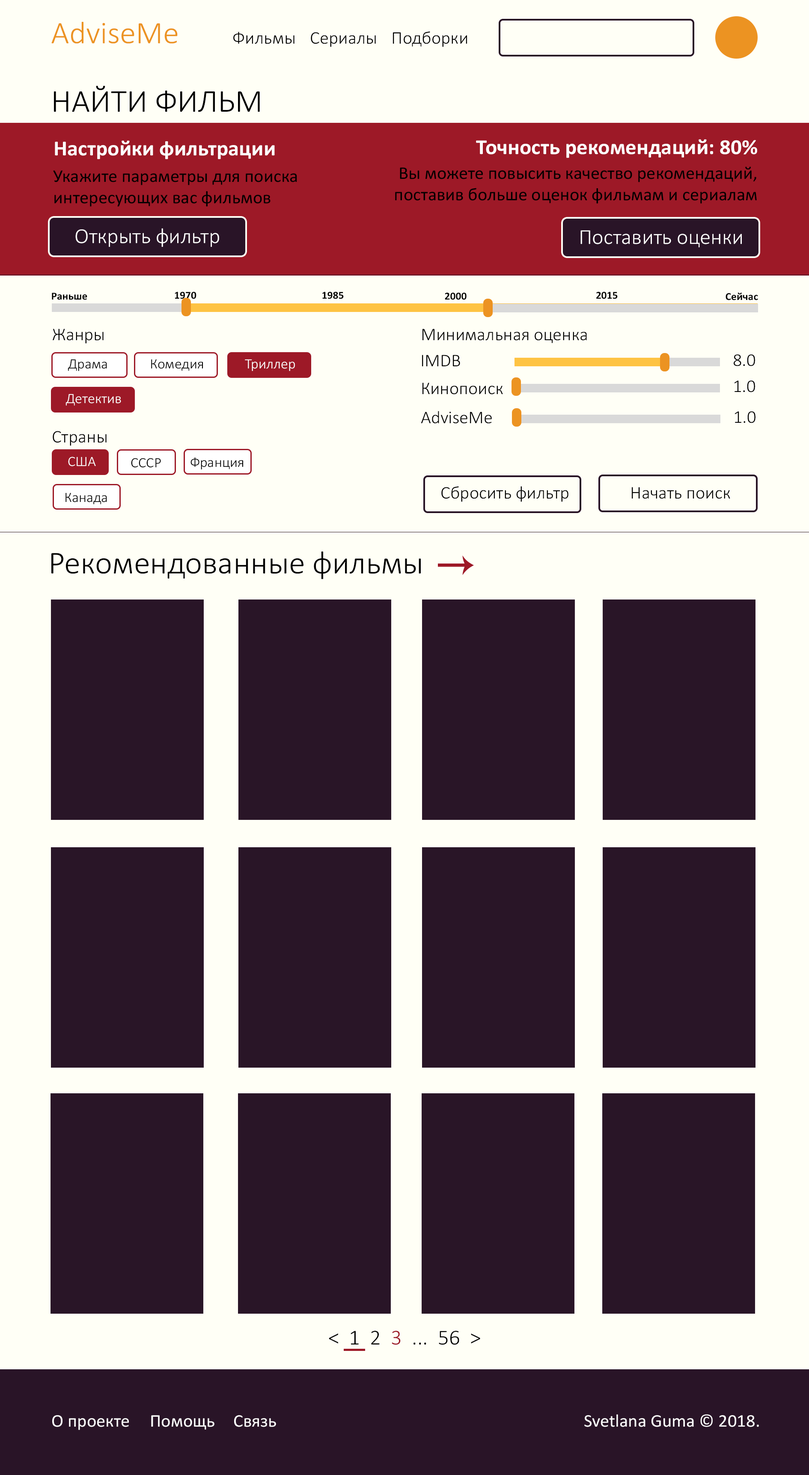
<style>
.page{position:relative;width:809px;height:1475px;background:#fffff6}
.page>*{position:absolute;margin:0}
.t1{font:31.6px "Calibri-Light";color:#ec9322}
.t2{font:17.8px "Calibri-Light";color:#000000}
.t3{font:32.1px "Calibri-Light";color:#000000}
.t4{font:5.1px "Calibri-Bold";color:#fefefe}
.t5{font:21.4px "Calibri-Bold";color:#ffffff}
.t6{font:17.8px "Calibri";color:#000000}
.t7{font:21.4px "Calibri-Light";color:#ffffff}
.t8{font:10.7px "Calibri-Bold";color:#000000}
.t9{font:14.3px "Calibri-Light";color:#000000}
.t10{font:14.3px "Calibri-Light";color:#ffffff}
.t11{font:21.4px "Calibri-Light";color:#000000}
.t12{font:21.4px "Calibri-Light";color:#9d1927}
.t13{font:17.8px "Calibri";color:#ffffff}
</style>
<div class="page">
<p class="t1" style="left:51px;top:22px;width:127px;height:22px">AdviseMe</p>
<p class="t2" style="left:233px;top:32px;width:61px;height:12px">Фильмы</p>
<p class="t2" style="left:311px;top:32px;width:65px;height:15px">Сериалы</p>
<p class="t2" style="left:393px;top:31px;width:74px;height:16px">Подборки</p>
<p class="t3" style="left:54px;top:86px;width:206px;height:26px">НАЙТИ ФИЛЬМ</p>
<p class="t4" style="left:55px;top:140px;width:220px;height:19px">Настройки фильтрации</p>
<p class="t5" style="left:476px;top:139px;width:281px;height:19px">Точность рекомендаций: 80%</p>
<p class="t6" style="left:53px;top:170px;width:244px;height:37px">Укажите параметры для поиска<br>интересующих вас фильмов</p>
<p class="t6" style="left:395px;top:166px;width:361px;height:38px;text-align:right">Вы можете повысить качество рекомендаций,<br>поставив больше оценок фильмам и сериалам</p>
<p class="t7" style="left:75px;top:228px;width:144px;height:19px">Открыть фильтр</p>
<p class="t7" style="left:580px;top:230px;width:161px;height:17px">Поставить оценки</p>
<p class="t8" style="left:52px;top:293px;width:35px;height:7px">Раньше</p>
<p class="t8" style="left:175px;top:292px;width:21px;height:7px">1970</p>
<p class="t8" style="left:322px;top:292px;width:22px;height:7px">1985</p>
<p class="t8" style="left:445px;top:293px;width:21px;height:7px">2000</p>
<p class="t8" style="left:596px;top:292px;width:21px;height:7px">2015</p>
<p class="t8" style="left:725px;top:293px;width:33px;height:7px">Сейчас</p>
<p class="t2" style="left:53px;top:329px;width:51px;height:15px">Жанры</p>
<p class="t2" style="left:422px;top:329px;width:165px;height:14px">Минимальная оценка</p>
<p class="t9" style="left:68px;top:359px;width:39px;height:12px">Драма</p>
<p class="t9" style="left:151px;top:359px;width:52px;height:12px">Комедия</p>
<p class="t10" style="left:245px;top:359px;width:50px;height:12px">Триллер</p>
<p class="t2" style="left:422px;top:355px;width:38px;height:11px">IMDB</p>
<p class="t2" style="left:733px;top:354px;width:22px;height:12px">8.0</p>
<p class="t2" style="left:422px;top:382px;width:81px;height:12px">Кинопоиск</p>
<p class="t2" style="left:734px;top:380px;width:21px;height:12px">1.0</p>
<p class="t10" style="left:65px;top:394px;width:56px;height:12px">Детектив</p>
<p class="t2" style="left:421px;top:411px;width:71px;height:13px">AdviseMe</p>
<p class="t2" style="left:735px;top:411px;width:20px;height:12px">1.0</p>
<p class="t2" style="left:53px;top:431px;width:54px;height:15px">Страны</p>
<p class="t10" style="left:68px;top:456px;width:28px;height:10px">США</p>
<p class="t9" style="left:131px;top:458px;width:30px;height:10px">СССР</p>
<p class="t9" style="left:190px;top:457px;width:53px;height:12px">Франция</p>
<p class="t9" style="left:65px;top:492px;width:42px;height:12px">Канада</p>
<p class="t2" style="left:441px;top:486px;width:127px;height:16px">Сбросить фильтр</p>
<p class="t2" style="left:631px;top:487px;width:99px;height:12px">Начать поиск</p>
<p class="t3" style="left:51px;top:551px;width:370px;height:28px">Рекомендованные фильмы</p>
<p class="t11" style="left:329px;top:1331px;width:151px;height:14px">&lt;  1  2  <span class="t12">3</span>  ...  56  &gt;</p>
<p class="t13" style="left:52px;top:1415px;width:77px;height:15px">О проекте</p>
<p class="t13" style="left:151px;top:1415px;width:63px;height:14px">Помощь</p>
<p class="t13" style="left:234px;top:1415px;width:42px;height:12px">Связь</p>
<p class="t13" style="left:584px;top:1414px;width:175px;height:13px">Svetlana Guma © 2018.</p>
</div>
